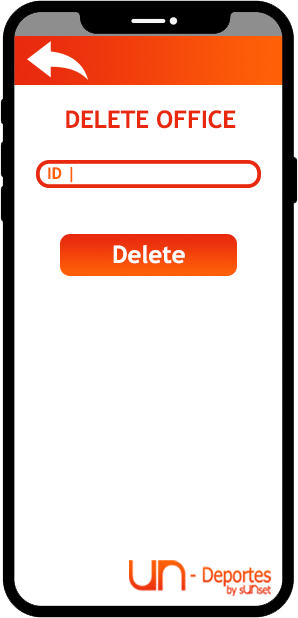
<style>
.page{position:relative;width:298px;height:618px;background:#ffffff}
.page>*{position:absolute;margin:0}
.t1{font:24px "TrebuchetMS-Bold";color:#e9290f}
.t2{font:16px "TrebuchetMS-Bold";color:#ff6107}
.t3{font:24px "TrebuchetMS-Bold";color:#ffffff}
</style>
<div class="page">
<p class="t1" style="left:66px;top:110px;width:170px;height:19px">DELETE OFFICE</p>
<p class="t2" style="left:48px;top:167px;width:25px;height:16px">ID |</p>
<p class="t3" style="left:113px;top:244px;width:72px;height:20px">Delete</p>
</div>
